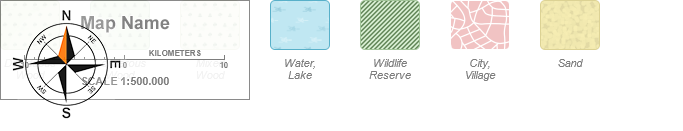
<style>
.page{position:relative;width:683px;height:131px;background:#ffffff}
.page>*{position:absolute;margin:0}
.t1{font:18px "Arial-BoldMT";color:#828282}
.t2{font:8px "Arial-BoldMT";color:#7d7d7d}
.t3{font:11px/12px "Arial-ItalicMT";color:#7d7d7d}
.t4{font:11px "Arial-ItalicMT";color:#7d7d7d}
.t5{font:11px "Arial-BoldMT";color:#7d7d7d}
</style>
<div class="page">
<p class="t1" style="left:81px;top:16px;width:89px;height:17px">Map Name</p>
<p class="t2" style="left:149px;top:50px;width:52px;height:6px">KILOMETERS</p>
<p class="t2" style="left:21px;top:62px;width:8px;height:6px">10</p>
<p class="t2" style="left:123px;top:62px;width:4px;height:6px">0</p>
<p class="t2" style="left:220px;top:62px;width:8px;height:6px">10</p>
<p class="t3" style="left:285px;top:59px;width:30px;height:20px;text-align:center">Water,<br>Lake</p>
<p class="t3" style="left:369px;top:59px;width:42px;height:20px;text-align:center">Wildlife<br>Reserve</p>
<p class="t3" style="left:466px;top:59px;width:30px;height:22px;text-align:center">City,<br>Village</p>
<p class="t4" style="left:558px;top:59px;width:25px;height:8px">Sand</p>
<p class="t5" style="left:82px;top:77px;width:87px;height:8px">SCALE 1:500.000</p>
</div>
